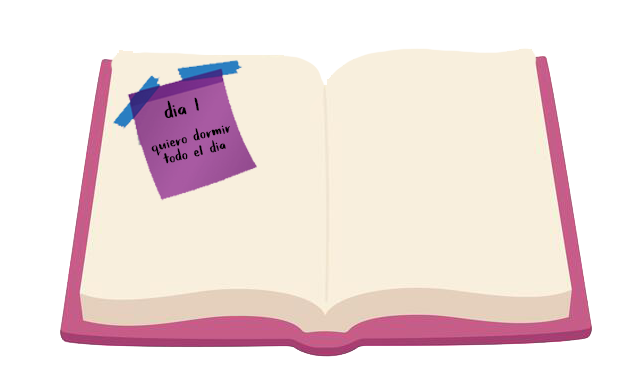
<style>
.page{position:relative;width:638px;height:367px;background:#ffffff}
.page>*{position:absolute;margin:0}
.t1{font:35.7px "BabyFox";color:#000000;text-transform:uppercase}
.t2{font:25px/6px "BabyFox";color:#000000;text-transform:uppercase}
</style>
<div class="page">
<p class="t1" style="left:164px;top:97px;width:35px;height:21px;rotate:-14deg">dia 1</p>
<p class="t2" style="left:151px;top:125px;width:79px;height:39px;text-align:center;rotate:-14deg">quiero dormir<br>todo el DIA</p>
</div>
